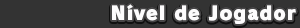
<style>
.page{position:relative;width:300px;height:28px;background:#333333}
.page>*{position:absolute;margin:0}
.t1{font:18.7px "RodinPro-UB";letter-spacing:0.054em;color:#fdfcfd}
</style>
<div class="page">
<p class="t1" style="left:112px;top:4px;width:184px;height:20px">Nível de Jogador</p>
</div>
